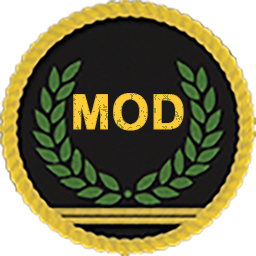
<style>
.page{position:relative;width:256px;height:256px;background:#ffffff}
.page>*{position:absolute;margin:0}
.t1{font:48px "Arial-BoldMT";color:#ffcc33;font-weight:bold}
</style>
<div class="page">
<p class="t1" style="left:73px;top:93px;width:111px;height:38px">MOD</p>
</div>
